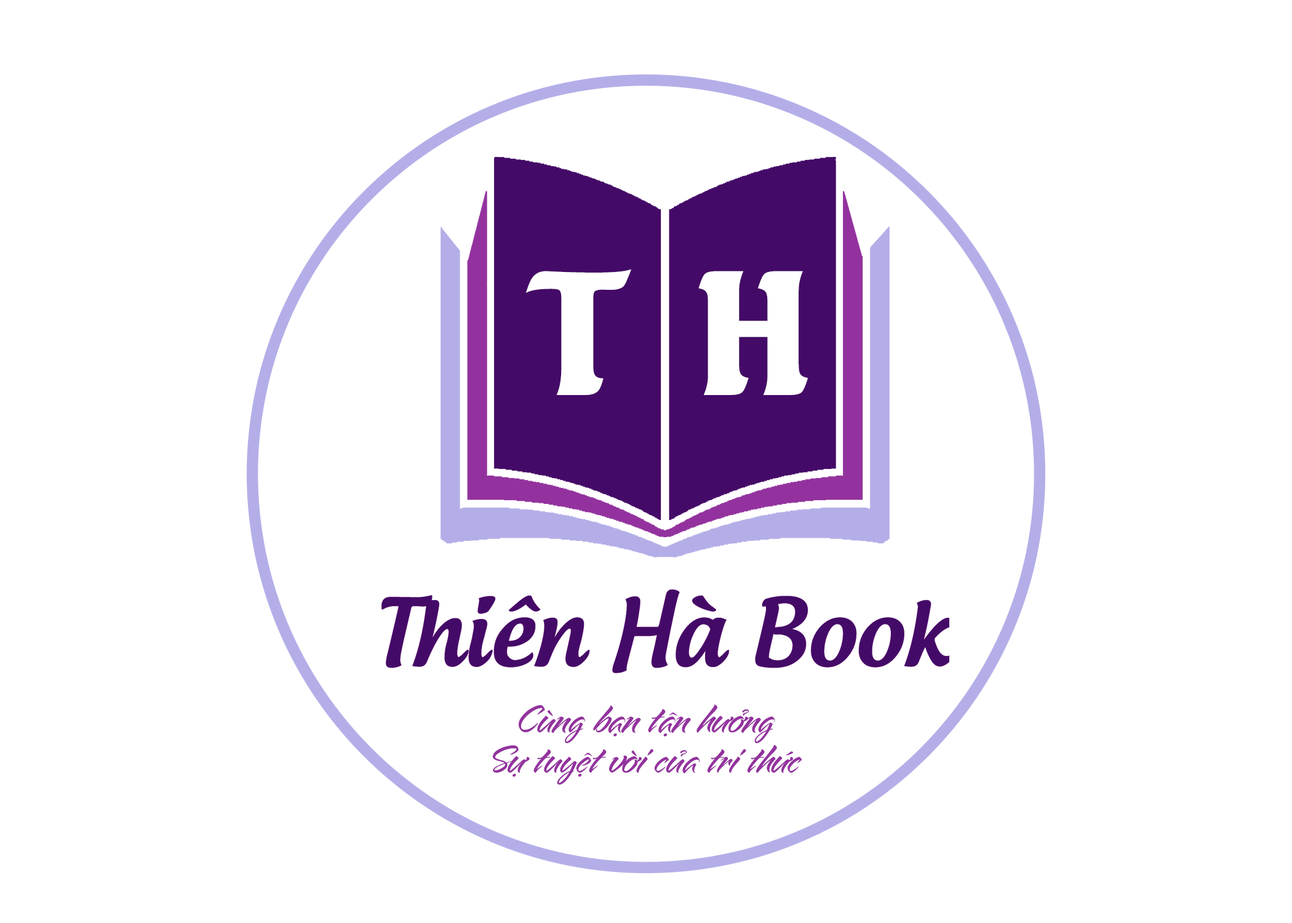
<style>
.page{position:relative;width:1292px;height:923px;background:#ffffff}
.page>*{position:absolute;margin:0}
.t1{font:171.2px "UTMSeagullBold";color:#ffffff}
.t2{font:33.3px/40.3px "UTM-Alpine-KT";color:#93329e}
</style>
<div class="page">
<p class="t1" style="left:526px;top:269px;width:105px;height:126px">T</p>
<p class="t1" style="left:698px;top:271px;width:110px;height:124px">H</p>
<p class="t2" style="left:493px;top:704px;width:309px;height:80px;text-align:center">Cùng bạn tận hưởng <br>Sự tuyệt vời của tri thức</p>
</div>
